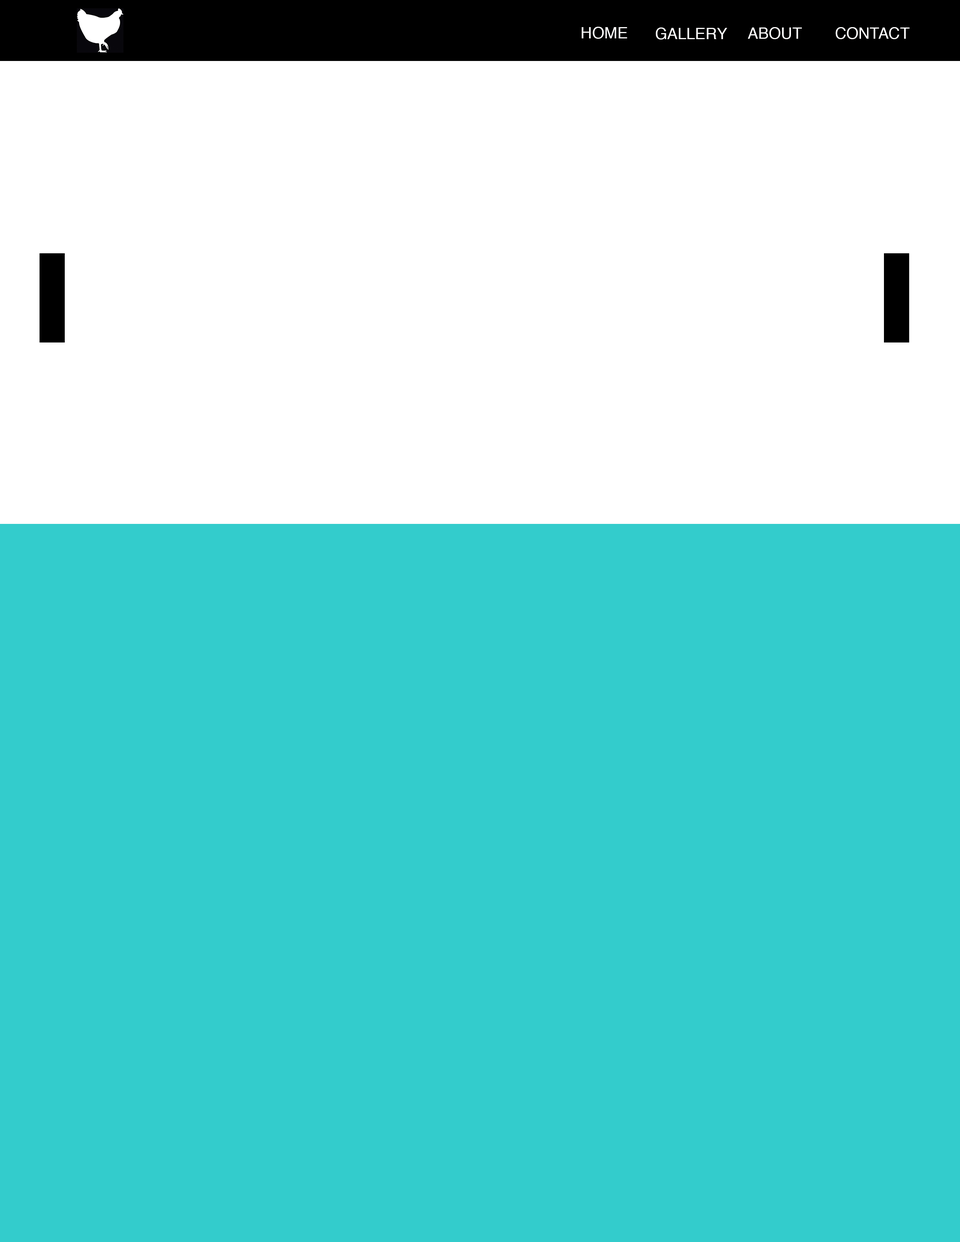
<style>
.page{position:relative;width:960px;height:1242px;background:#33cccc}
.page>*{position:absolute;margin:0}
.t1{font:15.7px "Helvetica";color:#fffefe}
</style>
<div class="page">
<p class="t1" style="left:582px;top:27px;width:45px;height:12px">HOME</p>
<p class="t1" style="left:656px;top:27px;width:71px;height:13px">GALLERY</p>
<p class="t1" style="left:748px;top:27px;width:54px;height:12px">ABOUT</p>
<p class="t1" style="left:835px;top:27px;width:74px;height:12px">CONTACT</p>
</div>
